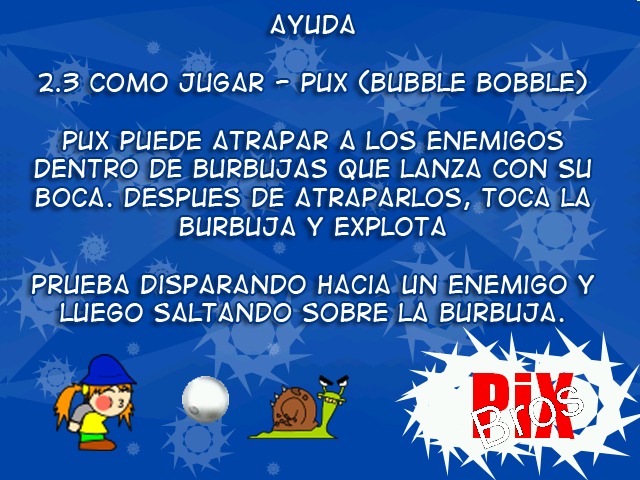
<style>
.page{position:relative;width:640px;height:480px}
.page>*{position:absolute;margin:0}
.t1{font:24px "DigitalStrip2";color:#ffffff}
</style>
<div class="page">
<p class="t1" style="left:31px;top:14px;width:564px;height:308px;text-align:center">AYUDA<br><br>2.3 Como jugar - pux (bubble bobble)<br><br>pux puede atrapar a los enemigos dentro de burbujas que lanza con su boca. despues de atraparlos, toca la burbuja y explota<br><br>prueba disparando hacia un enemigo y luego saltando sobre la burbuja.</p>
</div>
